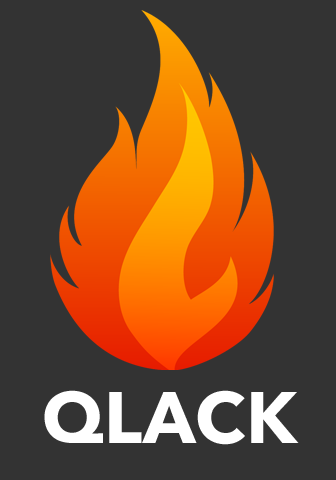
<style>
.page{position:relative;width:336px;height:480px;background:#333333}
.page>*{position:absolute;margin:0}
.t1{font:72px "AvenirNext-Bold";letter-spacing:0.01em;color:#ffffff}
</style>
<div class="page">
<p class="t1" style="left:44px;top:390px;width:255px;height:55px">QLACK</p>
</div>
